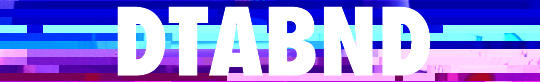
<style>
.page{position:relative;width:540px;height:82px;background:#ffffff}
.page>*{position:absolute;margin:0}
.t1{font:92px "Futura-CondensedExtraBold";color:#ffffff}
</style>
<div class="page">
<p class="t1" style="left:117px;top:6px;width:314px;height:70px">DTABND</p>
</div>
